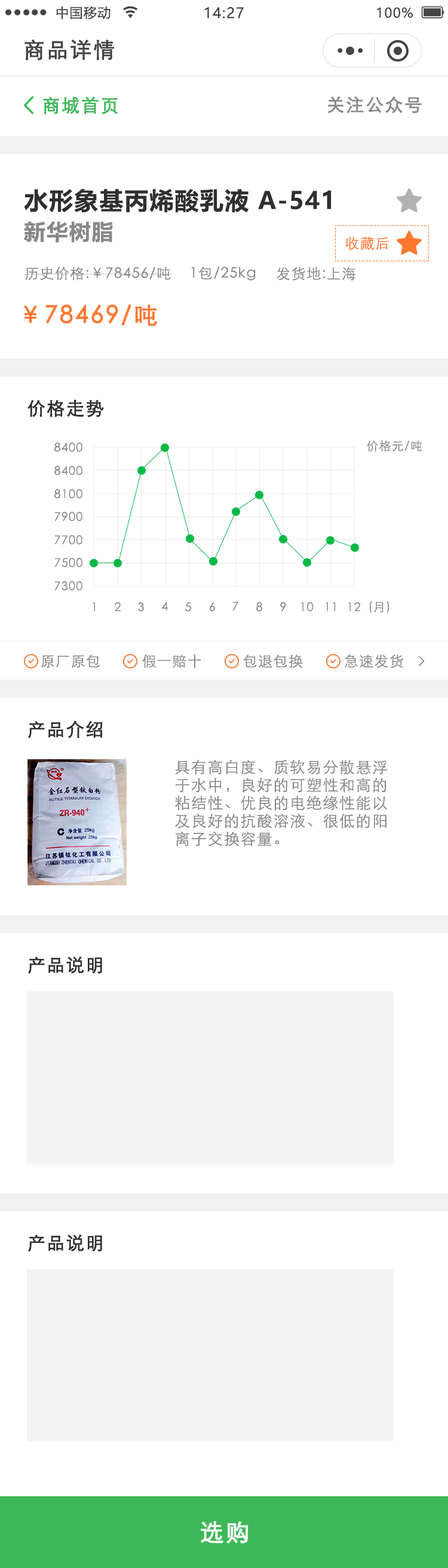
<style>
.page{position:relative;width:448px;height:1568px;background:#ffffff}
.page>*{position:absolute;margin:0}
.t1{font:13.2px "MicrosoftYaHei";letter-spacing:0.06em;color:#444444}
.t2{font:14.3px "MicrosoftYaHei";letter-spacing:0.06em;color:#444444}
.t3{font:21.5px "STXihei";letter-spacing:0.06em;color:#444444;font-weight:bold}
.t4{font:17.9px "STXihei";letter-spacing:0.06em;color:#3db858;font-weight:bold}
.t5{font:17.9px "STXihei";letter-spacing:0.06em;color:#888888;font-weight:bold}
.t6{font:23.9px "MicrosoftYaHei-Bold";letter-spacing:0.05em;color:#302f2f}
.t7{font:21.5px "MicrosoftYaHei-Bold";letter-spacing:0.05em;color:#888888}
.t8{font:14.3px "STXihei";letter-spacing:0.06em;color:#ff782f}
.t9{font:14.3px "STXihei";letter-spacing:0.06em;color:#888888}
.t10{font:23.9px "STXihei";letter-spacing:0.06em;color:#ff782f;font-weight:bold}
.t11{font:17.9px "STXihei";letter-spacing:0.06em;color:#302f2f;font-weight:bold}
.t12{font:12px "STXihei";letter-spacing:0.06em;color:#888888}
.t13{font:14.3px "SimSun";letter-spacing:0.06em;color:#444444}
.t14{font:15.5px/17.9px "STXihei";letter-spacing:0.06em;color:#888888}
.t15{font:23.9px "STXihei";letter-spacing:0.06em;color:#ffffff;font-weight:bold}
</style>
<div class="page">
<p class="t1" style="left:56px;top:6px;width:55px;height:14px">中国移动</p>
<p class="t2" style="left:205px;top:7px;width:39px;height:12px">14:27</p>
<p class="t1" style="left:377px;top:7px;width:36px;height:11px">100%</p>
<p class="t3" style="left:25px;top:39px;width:89px;height:21px">商品详情</p>
<p class="t4" style="left:43px;top:96px;width:75px;height:18px">商城首页</p>
<p class="t5" style="left:328px;top:96px;width:94px;height:18px">关注公众号</p>
<p class="t6" style="left:24px;top:189px;width:308px;height:24px">水形象基丙烯酸乳液 A-541</p>
<p class="t7" style="left:24px;top:221px;width:89px;height:22px">新华树脂</p>
<p class="t8" style="left:346px;top:237px;width:43px;height:13px">收藏后</p>
<p class="t9" style="left:24px;top:267px;width:148px;height:13px">历史价格:￥78456/吨</p>
<p class="t9" style="left:191px;top:267px;width:65px;height:13px">1包/25kg</p>
<p class="t9" style="left:277px;top:267px;width:79px;height:14px">发货地:上海</p>
<p class="t10" style="left:24px;top:304px;width:133px;height:22px">￥78469/吨</p>
<p class="t11" style="left:27px;top:399px;width:77px;height:18px">价格走势</p>
<p class="t12" style="left:54px;top:442px;width:28px;height:10px">8400</p>
<p class="t12" style="left:367px;top:440px;width:56px;height:12px">价格元/吨</p>
<p class="t12" style="left:54px;top:466px;width:28px;height:9px">8400</p>
<p class="t12" style="left:54px;top:489px;width:28px;height:10px">8100</p>
<p class="t12" style="left:54px;top:512px;width:28px;height:9px">7900</p>
<p class="t12" style="left:54px;top:535px;width:28px;height:10px">7700</p>
<p class="t12" style="left:54px;top:558px;width:28px;height:9px">7500</p>
<p class="t12" style="left:54px;top:581px;width:28px;height:10px">7300</p>
<p class="t12" style="left:93px;top:602px;width:2px;height:10px">1</p>
<p class="t12" style="left:115px;top:602px;width:6px;height:10px">2</p>
<p class="t12" style="left:138px;top:602px;width:6px;height:10px">3</p>
<p class="t12" style="left:161px;top:601px;width:7px;height:10px">4</p>
<p class="t12" style="left:185px;top:602px;width:6px;height:10px">5</p>
<p class="t12" style="left:209px;top:602px;width:6px;height:10px">6</p>
<p class="t12" style="left:233px;top:601px;width:6px;height:10px">7</p>
<p class="t12" style="left:256px;top:602px;width:6px;height:10px">8</p>
<p class="t12" style="left:280px;top:602px;width:6px;height:10px">9</p>
<p class="t12" style="left:301px;top:602px;width:13px;height:10px">10</p>
<p class="t12" style="left:326px;top:602px;width:10px;height:10px">11</p>
<p class="t12" style="left:349px;top:602px;width:12px;height:10px">12</p>
<p class="t12" style="left:370px;top:601px;width:20px;height:12px">(月)</p>
<p class="t9" style="left:345px;top:654px;width:59px;height:14px">急速发货</p>
<p class="t9" style="left:41px;top:655px;width:59px;height:13px">原厂原包</p>
<p class="t9" style="left:142px;top:655px;width:59px;height:13px">假一赔十</p>
<p class="t9" style="left:243px;top:655px;width:60px;height:13px">包退包换</p>
<p class="t13" style="left:419px;top:656px;width:6px;height:11px">&gt;</p>
<p class="t11" style="left:28px;top:720px;width:75px;height:18px">产品介绍</p>
<p class="t14" style="left:175px;top:760px;width:213px;height:86px">具有高白度、质软易分散悬浮<br>于水中，良好的可塑性和高的<br>粘结性、优良的电绝缘性能以<br>及良好的抗酸溶液、很低的阳<br>离子交换容量。</p>
<p class="t11" style="left:28px;top:956px;width:74px;height:18px">产品说明</p>
<p class="t11" style="left:28px;top:1234px;width:74px;height:18px">产品说明</p>
<p class="t15" style="left:201px;top:1521px;width:48px;height:22px">选购</p>
</div>
